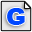
<style>
.page{position:relative;width:32px;height:32px}
.page>*{position:absolute;margin:0}
.t1{font:24px "Arial-Black";color:#0048ff}
</style>
<div class="page">
<p class="t1" style="left:7px;top:8px;width:18px;height:17px">G</p>
</div>
